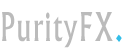
<style>
.page{position:relative;width:124px;height:55px;background:#ffffff}
.page>*{position:absolute;margin:0}
.t1{font:42px "Narkisim";letter-spacing:0.05em;color:#bbbbbb;scale:0.71 1}
.t2{font:50.4px "Narkisim";letter-spacing:0.05em;color:#33bee8;scale:0.71 1}
</style>
<div class="page">
<p class="t1" style="left:2px;top:12px;width:120px;height:36px">PurityFX<span class="t2">.</span></p>
</div>
